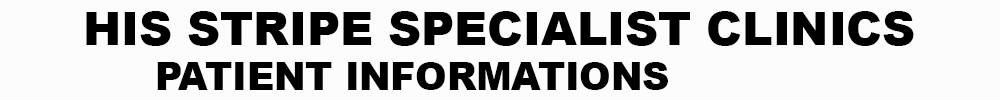
<style>
.page{position:relative;width:1000px;height:100px;background:#fdfcfc}
.page>*{position:absolute;margin:0}
.t1{font:45.8px "Arial-Black";color:#000000}
.t2{font:37.5px "Arial-Black";color:#000000}
</style>
<div class="page">
<p class="t1" style="left:86px;top:11px;width:828px;height:79px">HIS STRIPE SPECIALIST CLINICS<br><span class="t2">  PATIENT INFORMATIONS</span></p>
</div>
